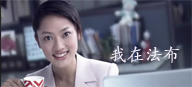
<style>
.page{position:relative;width:192px;height:87px}
.page>*{position:absolute;margin:0}
.t1{font:18px "STKaiti";color:#f8f0f9}
</style>
<div class="page">
<p class="t1" style="left:110px;top:45px;width:70px;height:18px">我在法布</p>
</div>
